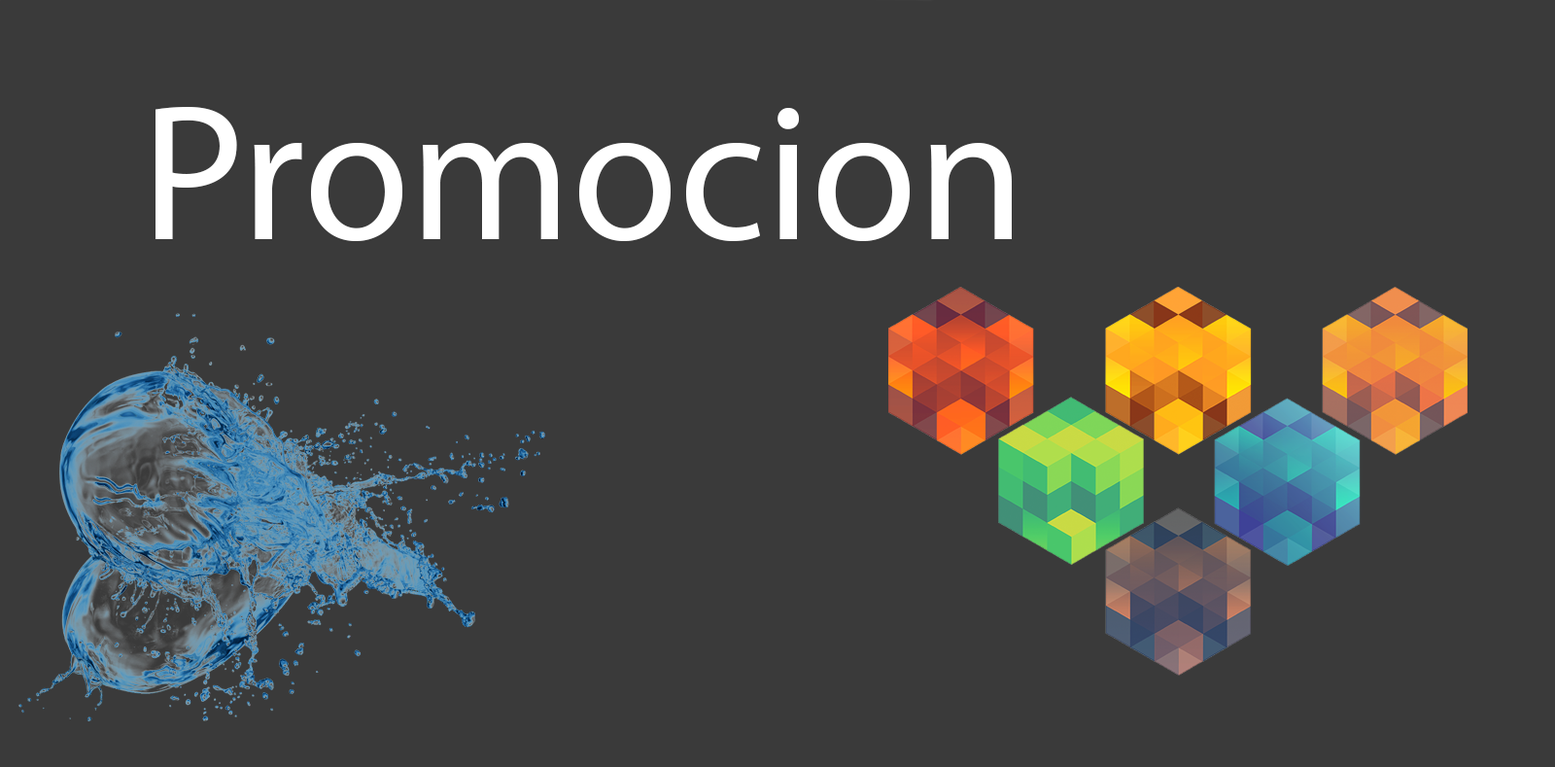
<style>
.page{position:relative;width:1555px;height:767px;background:#3a3a3a}
.page>*{position:absolute;margin:0}
.t1{font:194.4px "MyriadPro-Regular";color:#ffffff}
</style>
<div class="page">
<p class="t1" style="left:156px;top:107px;width:856px;height:134px">Promocion</p>
</div>
